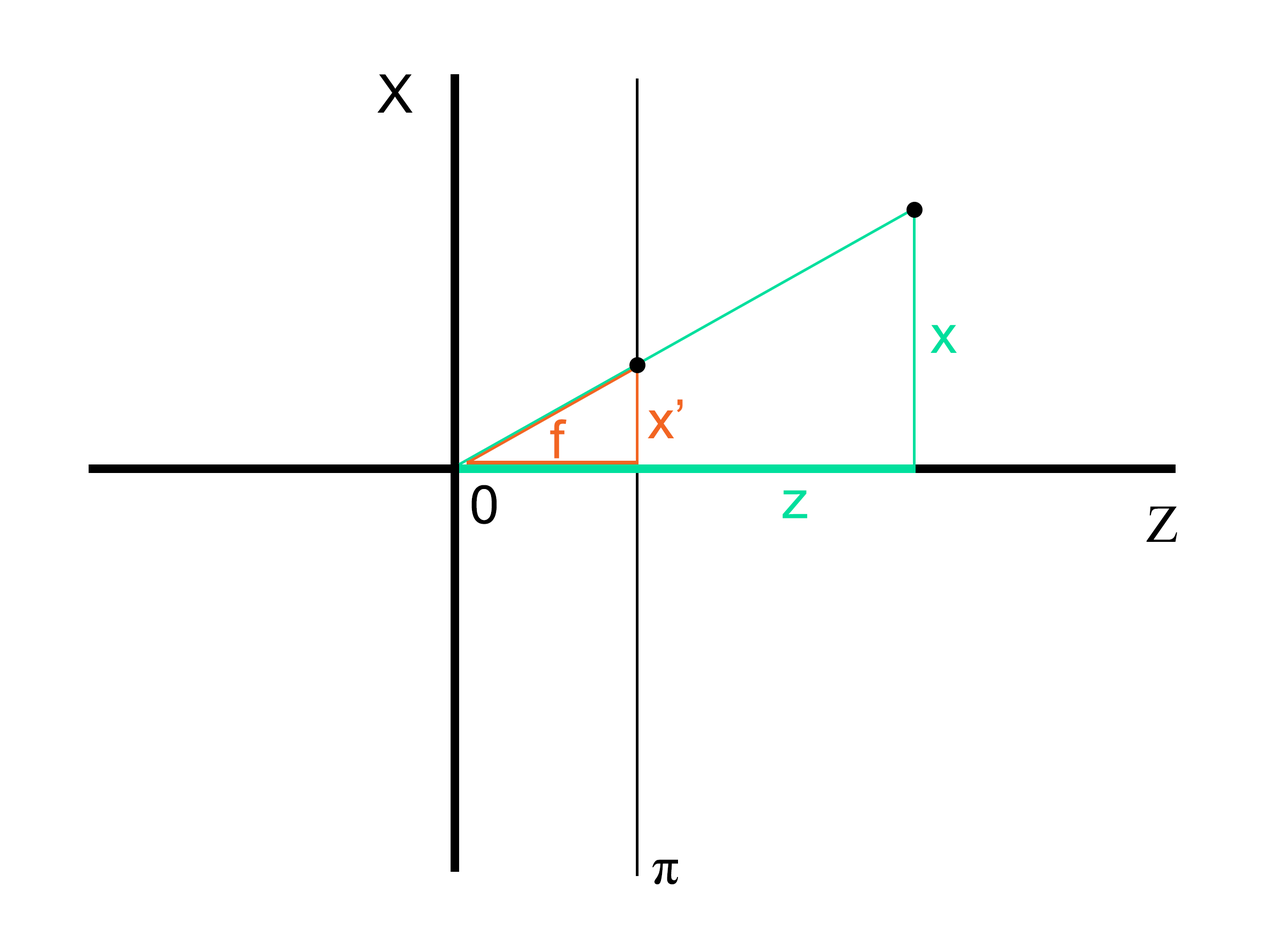
<style>
.page{position:relative;width:1261px;height:946px;background:#ffffff}
.page>*{position:absolute;margin:0}
.t1{font:53.4px "ArialMT";color:#000000}
.t2{font:53.4px "ArialMT";color:#00df9d}
.t3{font:53.4px "ArialMT";color:#f26522}
.t4{font:53.4px "TimesNewRomanPSMT";color:#000000}
</style>
<div class="page">
<p class="t1" style="left:377px;top:74px;width:36px;height:39px">X</p>
<p class="t2" style="left:930px;top:325px;width:26px;height:28px">x</p>
<p class="t3" style="left:647px;top:399px;width:36px;height:39px">x’</p>
<p class="t3" style="left:550px;top:419px;width:16px;height:39px">f</p>
<p class="t1" style="left:471px;top:485px;width:26px;height:39px">0</p>
<p class="t2" style="left:782px;top:490px;width:25px;height:28px">z</p>
<p class="t4" style="left:1146px;top:506px;width:31px;height:36px">Z</p>
<p class="t4" style="left:652px;top:859px;width:26px;height:25px">π</p>
</div>
